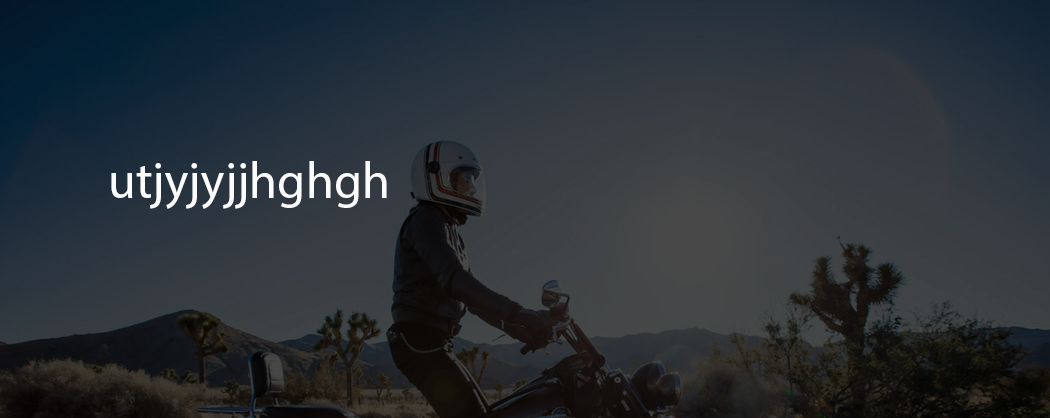
<style>
.page{position:relative;width:1050px;height:418px}
.page>*{position:absolute;margin:0}
.t1{font:71px "MyriadArabic-Regular";color:#fcfcfc}
</style>
<div class="page">
<p class="t1" style="left:111px;top:161px;width:276px;height:48px">utjyjyjjhghgh</p>
</div>
